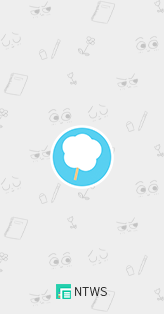
<style>
.page{position:relative;width:164px;height:314px;background:#eeeeee}
.page>*{position:absolute;margin:0}
.t1{font:12px "NotoSansCJKkr-Light";color:#333333}
</style>
<div class="page">
<p class="t1" style="left:75px;top:287px;width:32px;height:9px">NTWS</p>
</div>
